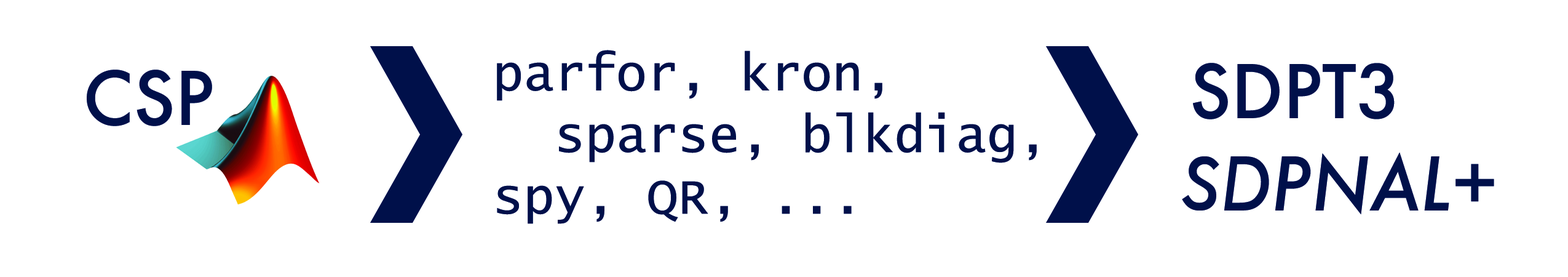
<style>
.page{position:relative;width:1568px;height:277px;background:#ffffff}
.page>*{position:absolute;margin:0}
.t1{font:51.2px "LucidaConsole";color:#001049}
.t2{font:71.7px "Futura-Medium";color:#001049}
.t3{font:71.7px "Futura-MediumItalic";color:#001049}
</style>
<div class="page">
<p class="t1" style="left:497px;top:50px;width:540px;height:174px">parfor, kron,<br>  sparse, blkdiag,<br>spy, QR, ...</p>
<p class="t2" style="left:1193px;top:63px;width:202px;height:56px">SDPT3</p>
<p class="t2" style="left:87px;top:69px;width:125px;height:57px">CSP</p>
<p class="t3" style="left:1182px;top:152px;width:312px;height:63px">SDPNAL+</p>
</div>
